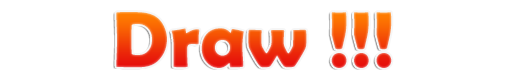
<style>
.page{position:relative;width:512px;height:83px;background:#ffffff}
.page>*{position:absolute;margin:0}
.t1{font:80px "BerlinSansFBDemi-Bold"}
</style>
<div class="page">
<p class="t1" style="left:116px;top:12px;width:276px;height:56px">Draw !!!</p>
</div>
